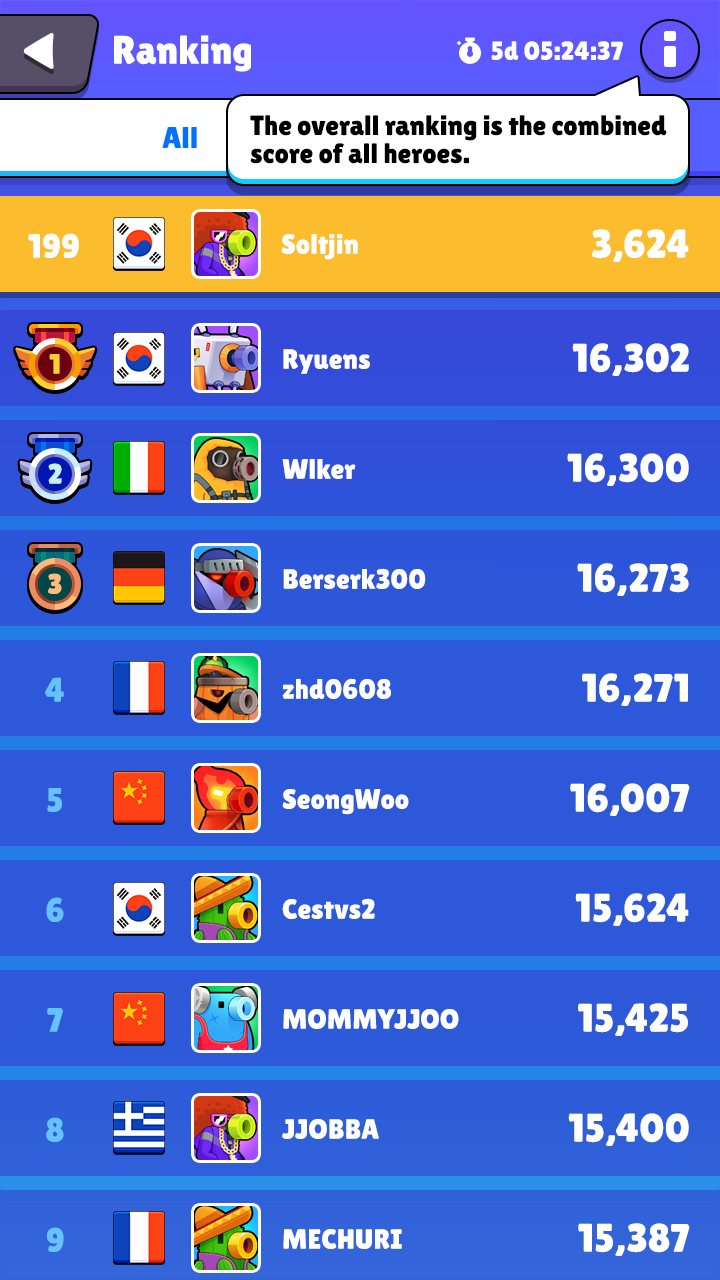
<style>
.page{position:relative;width:720px;height:1280px;background:#2d58d9}
.page>*{position:absolute;margin:0}
.t1{font:40px "LilitaOne";color:#ffffff}
.t2{font:26px "LilitaOne";color:#ffffff}
.t3{font:28px/28px "LilitaOne";color:#000000}
.t4{font:30px "LilitaOne";color:#0072ff}
.t5{font:34px "LilitaOne";color:#ffffff}
.t6{font:28px "LilitaOne";color:#ffffff}
.t7{font:40px/110px "LilitaOne";color:#ffffff}
.t8{font:28px/110px "LilitaOne";color:#ffcf2d}
.t9{font:28px/110px "LilitaOne";color:#c8eeff}
.t10{font:28px/110px "LilitaOne";color:#ffba7d}
.t11{font:34px/110px "LilitaOne";color:#65c2fe}
</style>
<div class="page">
<p class="t1" style="left:114px;top:35px;width:137px;height:37px">Ranking</p>
<p class="t2" style="left:491px;top:41px;width:132px;height:19px">5d 05:24:37</p>
<p class="t3" style="left:250px;top:115px;width:417px;height:49px">The overall ranking is the combined <br>score of all heroes.</p>
<p class="t4" style="left:162px;top:127px;width:35px;height:21px">All</p>
<p class="t5" style="left:28px;top:233px;width:51px;height:25px">199</p>
<p class="t1" style="left:592px;top:229px;width:97px;height:33px">3,624</p>
<p class="t6" style="left:281px;top:234px;width:77px;height:26px">Soltjin</p>
<p class="t7" style="left:567px;top:343px;width:123px;height:913px;text-align:right">16,302<br>16,300<br>16,273<br>16,271<br>16,007<br>15,624<br>15,425<br>15,400<br>15,387</p>
<p class="t8" style="left:48px;top:354px;width:14px;height:240px;text-align:center">1<br><span class="t9">2<br></span><span class="t10">3</span></p>
<p class="t11" style="left:45px;top:677px;width:19px;height:575px;text-align:center">4<br>5<br>6<br>7<br>8<br>9</p>
</div>
